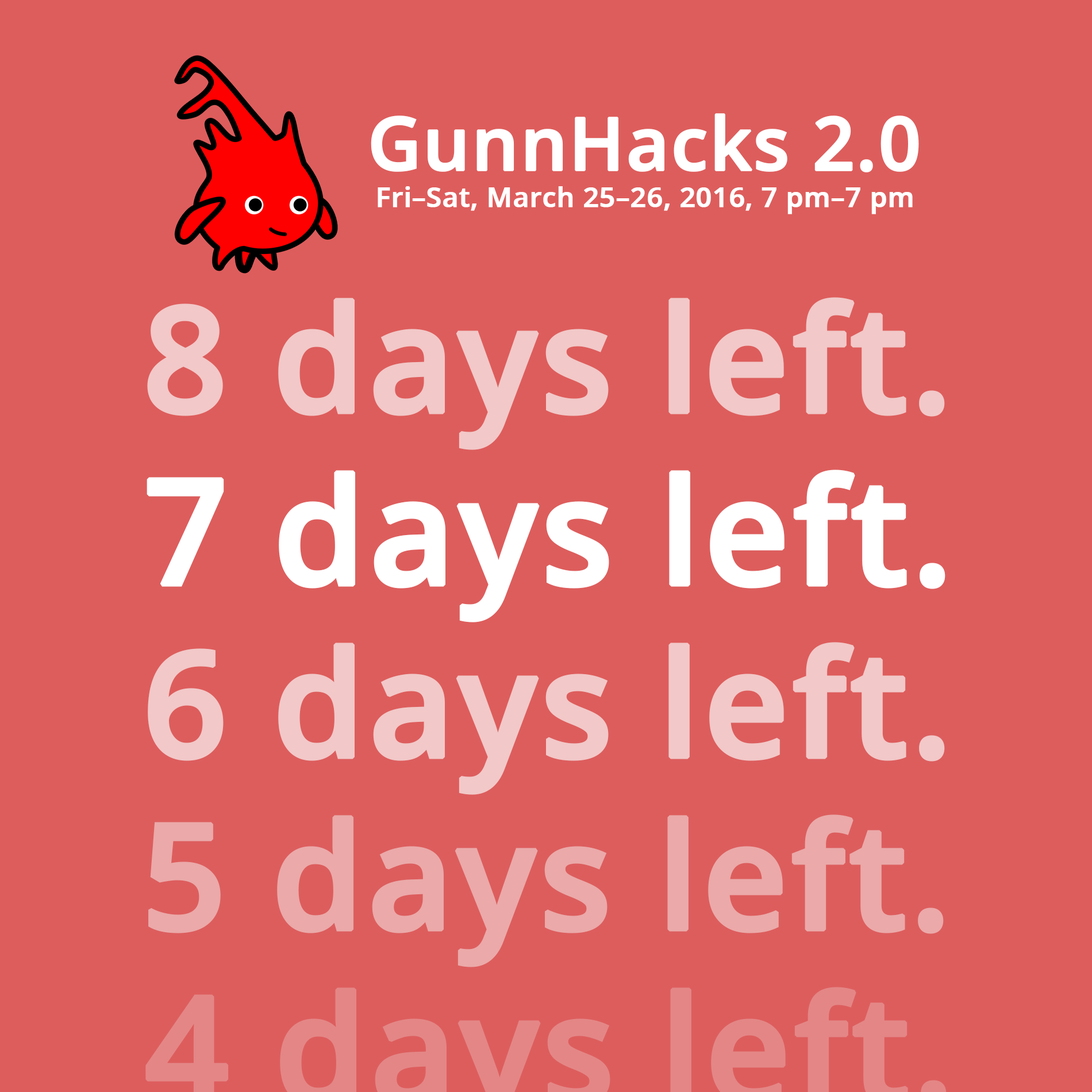
<style>
.page{position:relative;width:1092px;height:1092px;background:#dd5d5c}
.page>*{position:absolute;margin:0}
.t1{font:73.6px "OpenSans-Semibold";color:#ffffff;font-weight:bold}
.t2{font:27.6px "OpenSans-Semibold";color:#ffffff;font-weight:bold}
.t3{font:147.1px "OpenSans-Semibold";color:#f2c8c8;font-weight:bold}
.t4{font:147.1px "OpenSans-Semibold";color:#ffffff;font-weight:bold}
.t5{font:147.1px "OpenSans-Semibold";color:#eba9a9;font-weight:bold}
</style>
<div class="page">
<p class="t1" style="left:371px;top:113px;width:548px;height:59px">GunnHacks 2.0</p>
<p class="t2" style="left:378px;top:186px;width:535px;height:28px">Fri–Sat, March 25–26, 2016, 7 pm–7 pm</p>
<p class="t3" style="left:147px;top:297px;width:798px;height:153px">8 days left.</p>
<p class="t4" style="left:147px;top:470px;width:798px;height:152px">7 days left.</p>
<p class="t3" style="left:148px;top:642px;width:797px;height:153px">6 days left.</p>
<p class="t5" style="left:148px;top:814px;width:796px;height:153px">5 days left.</p>
</div>
